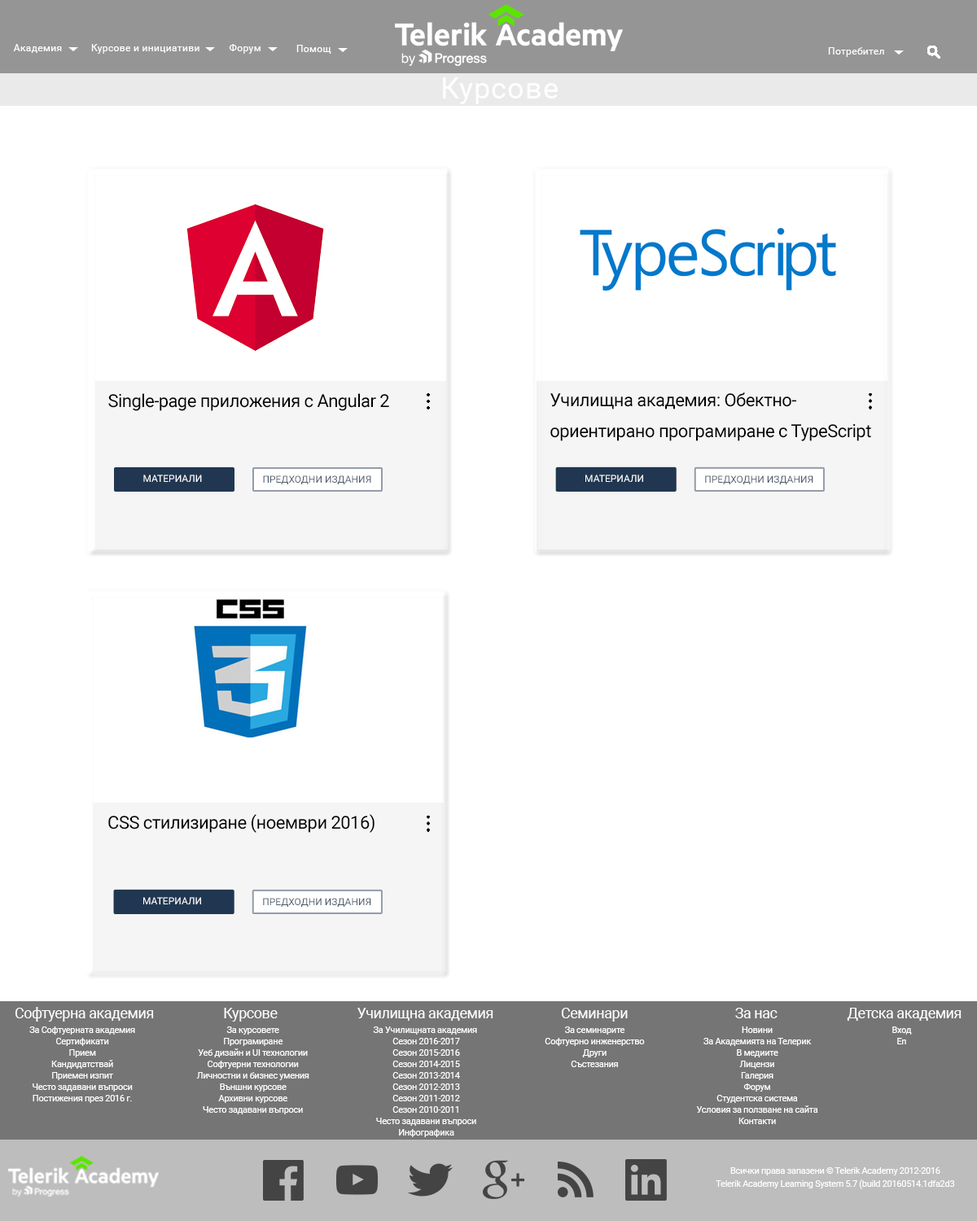
<style>
.page{position:relative;width:977px;height:1221px;background:#ffffff}
.page>*{position:absolute;margin:0}
.t1{font:9.8px "Roboto-Regular";letter-spacing:0.03em;color:#ffffff}
.t2{font:29.3px "Roboto-Regular";letter-spacing:0.03em;color:#fefefe}
.t3{font:17.9px "Roboto-Regular";letter-spacing:-0.025em;color:#000000}
.t4{font:18px/31.1px "Roboto-Regular";letter-spacing:-0.025em;color:#000000}
.t5{font:9.8px "Roboto-Regular";color:#ffffff;text-transform:uppercase}
.t6{font:9.8px "Roboto-Regular";color:#4f5d6c;text-transform:uppercase}
.t7{font:18px "Roboto-Regular";letter-spacing:-0.025em;color:#000000}
.t8{font:14.7px "Roboto-Regular";letter-spacing:-0.025em;color:#fefefe}
.t9{font:9px/11.4px "Roboto-Regular";letter-spacing:-0.025em;color:#fefefe}
.t10{font:9px/13px "Roboto-Regular";letter-spacing:-0.025em;color:#ffffff}
</style>
<div class="page">
<p class="t1" style="left:13px;top:44px;width:49px;height:9px">Академия</p>
<p class="t1" style="left:91px;top:44px;width:108px;height:10px">Курсове и инициативи</p>
<p class="t1" style="left:229px;top:44px;width:31px;height:10px">Форум</p>
<p class="t1" style="left:296px;top:45px;width:35px;height:9px">Помощ</p>
<p class="t1" style="left:828px;top:47px;width:56px;height:10px">Потребител</p>
<p class="t2" style="left:443px;top:77px;width:115px;height:27px">Курсове</p>
<p class="t3" style="left:108px;top:393px;width:281px;height:18px">Single-page приложения с Angular 2</p>
<p class="t4" style="left:550px;top:392px;width:321px;height:49px">Училищна академия: Обектно-<br>ориентирано програмиране с TypeScript</p>
<p class="t5" style="left:143px;top:475px;width:59px;height:7px">материали</p>
<p class="t6" style="left:263px;top:475px;width:108px;height:9px">Предходни издания</p>
<p class="t5" style="left:585px;top:475px;width:58px;height:7px">материали</p>
<p class="t6" style="left:705px;top:475px;width:108px;height:9px">Предходни издания</p>
<p class="t7" style="left:108px;top:814px;width:266px;height:19px">CSS стилизиране (ноември 2016)</p>
<p class="t5" style="left:143px;top:897px;width:58px;height:7px">материали</p>
<p class="t6" style="left:263px;top:898px;width:108px;height:9px">Предходни издания</p>
<p class="t8" style="left:15px;top:1007px;width:139px;height:14px">Софтуерна академия</p>
<p class="t8" style="left:224px;top:1008px;width:54px;height:13px">Курсове</p>
<p class="t8" style="left:357px;top:1008px;width:136px;height:13px">Училищна академия</p>
<p class="t8" style="left:561px;top:1008px;width:67px;height:13px">Семинари</p>
<p class="t8" style="left:735px;top:1008px;width:42px;height:10px">За нас</p>
<p class="t8" style="left:846px;top:1008px;width:115px;height:13px">Детска академия</p>
<p class="t9" style="left:29px;top:1026px;width:106px;height:77px;text-align:center">За Софтуерната академия<br> Сертификати<br> Прием<br> Кандидатствай<br> Приемен изпит<br> Често задавани въпроси<br> Постижения през 2016 г.</p>
<p class="t9" style="left:196px;top:1026px;width:113px;height:88px;text-align:center">За курсовете<br> Програмиране<br> Уеб дизайн и UI технологии<br> Софтуерни технологии<br> Личностни и бизнес умения<br> Външни курсове<br> Архивни курсове<br> Често задавани въпроси</p>
<p class="t9" style="left:373px;top:1026px;width:104px;height:111px;text-align:center">За Училищната академия<br> Сезон 2016-2017<br> Сезон 2015-2016<br> Сезон 2014-2015<br> Сезон 2013-2014<br> Сезон 2012-2013<br> Сезон 2011-2012<br> Сезон 2010-2011<br> Често задавани въпроси<br> Инфографика</p>
<p class="t9" style="left:545px;top:1026px;width:100px;height:41px;text-align:center">За семинарите<br> Софтуерно инженерство<br> Други<br> Състезания</p>
<p class="t9" style="left:696px;top:1026px;width:122px;height:98px;text-align:center">Новини<br> За Академията на Телерик<br> В медиите<br> Лицензи<br> Галерия<br> Форум<br> Студентска система<br> Условия за ползване на сайта<br> Контакти</p>
<p class="t9" style="left:892px;top:1026px;width:20px;height:18px;text-align:center">Вход<br>En</p>
<p class="t10" style="left:715px;top:1167px;width:240px;height:22px;text-align:center">Всички права запазени © Telerik Academy 2012-2016<br>Telerik Academy Learning System 5.7 (build 20160514.1dfa2d3</p>
</div>
